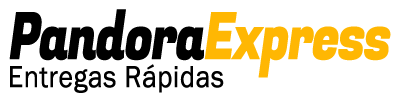
<style>
.page{position:relative;width:400px;height:100px;background:#ffffff}
.page>*{position:absolute;margin:0}
.t1{font:65px "FugazOne-Regular";letter-spacing:-0.06em;color:#000000;font-weight:bold;scale:0.77 1}
.t2{font:65px "FugazOne-Regular";letter-spacing:-0.06em;color:#ffb703;font-weight:bold;scale:0.77 1}
.t3{font:31px "FranklinGothic-Book";color:#000000;font-weight:bold;scale:0.89 1}
</style>
<div class="page">
<p class="t1" style="left:9px;top:9px;width:382px;height:69px">Pandora<span class="t2">Express</span></p>
<p class="t3" style="left:10px;top:64px;width:214px;height:29px">Entregas Rápidas</p>
</div>
